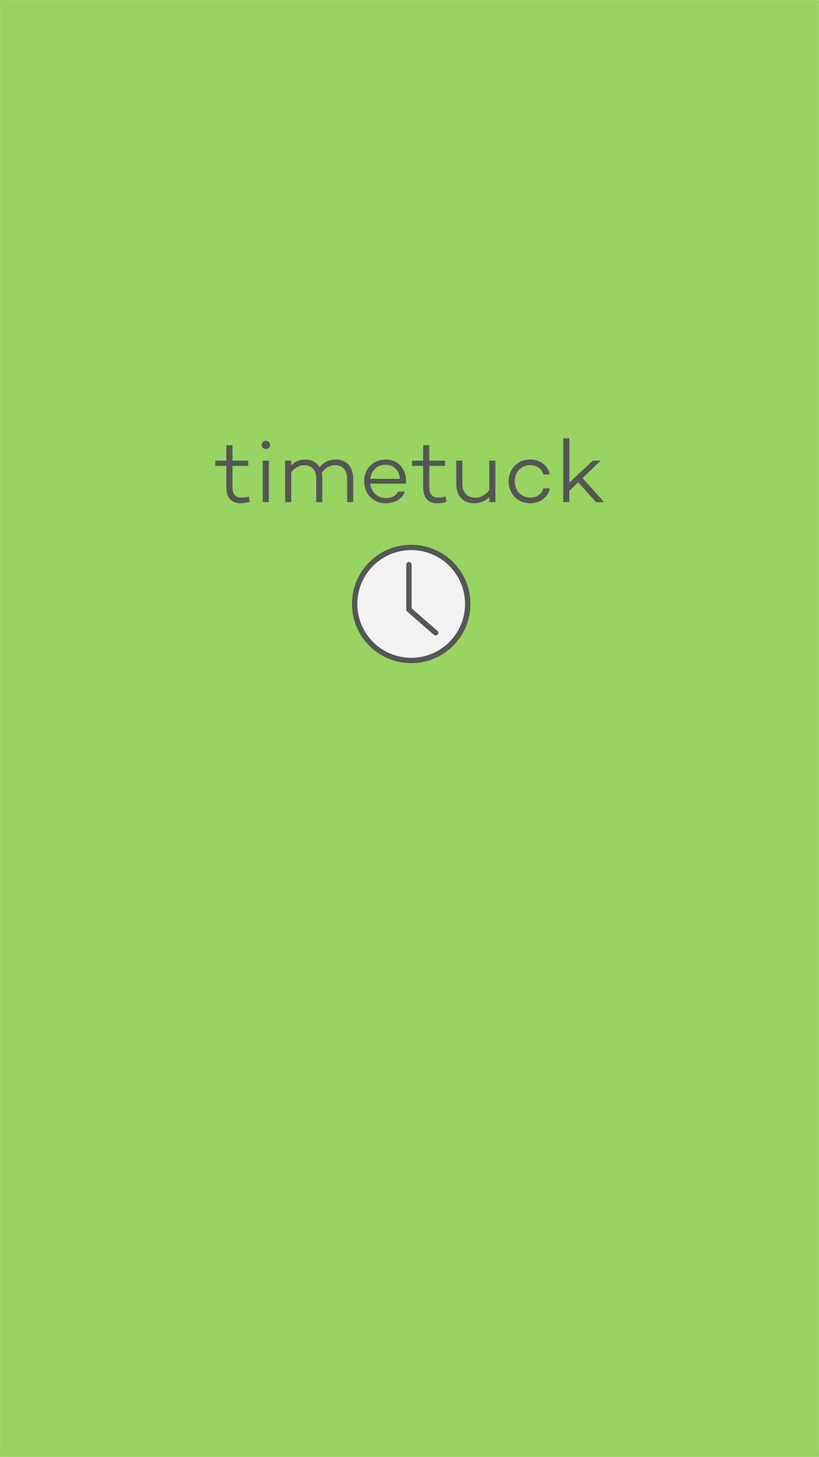
<style>
.page{position:relative;width:819px;height:1457px;background:#97d461}
.page>*{position:absolute;margin:0}
.t1{font:90.4px "Campton-LightDEMO";color:#555555}
</style>
<div class="page">
<p class="t1" style="left:215px;top:438px;width:389px;height:65px">timetuck</p>
</div>
